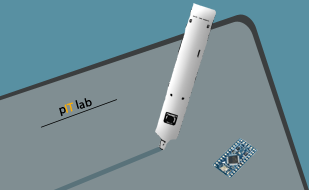
<style>
.page{position:relative;width:309px;height:190px;background:#808e92}
.page>*{position:absolute;margin:0}
.t1{font:12px "MyriadPro-Regular";color:#000000}
.t2{font:12px "MyriadPro-Regular";color:#ffae00}
</style>
<div class="page">
<p class="t1" style="left:59px;top:98px;width:33px;height:19px;rotate:-15deg">p<span class="t2">IT </span>lab</p>
</div>
